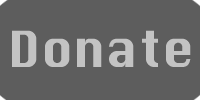
<style>
.page{position:relative;width:200px;height:100px;background:#5d5d5d}
.page>*{position:absolute;margin:0}
.t1{font:48.4px "Silom";color:#c3c3c3}
</style>
<div class="page">
<p class="t1" style="left:12px;top:30px;width:179px;height:37px">Donate</p>
</div>
